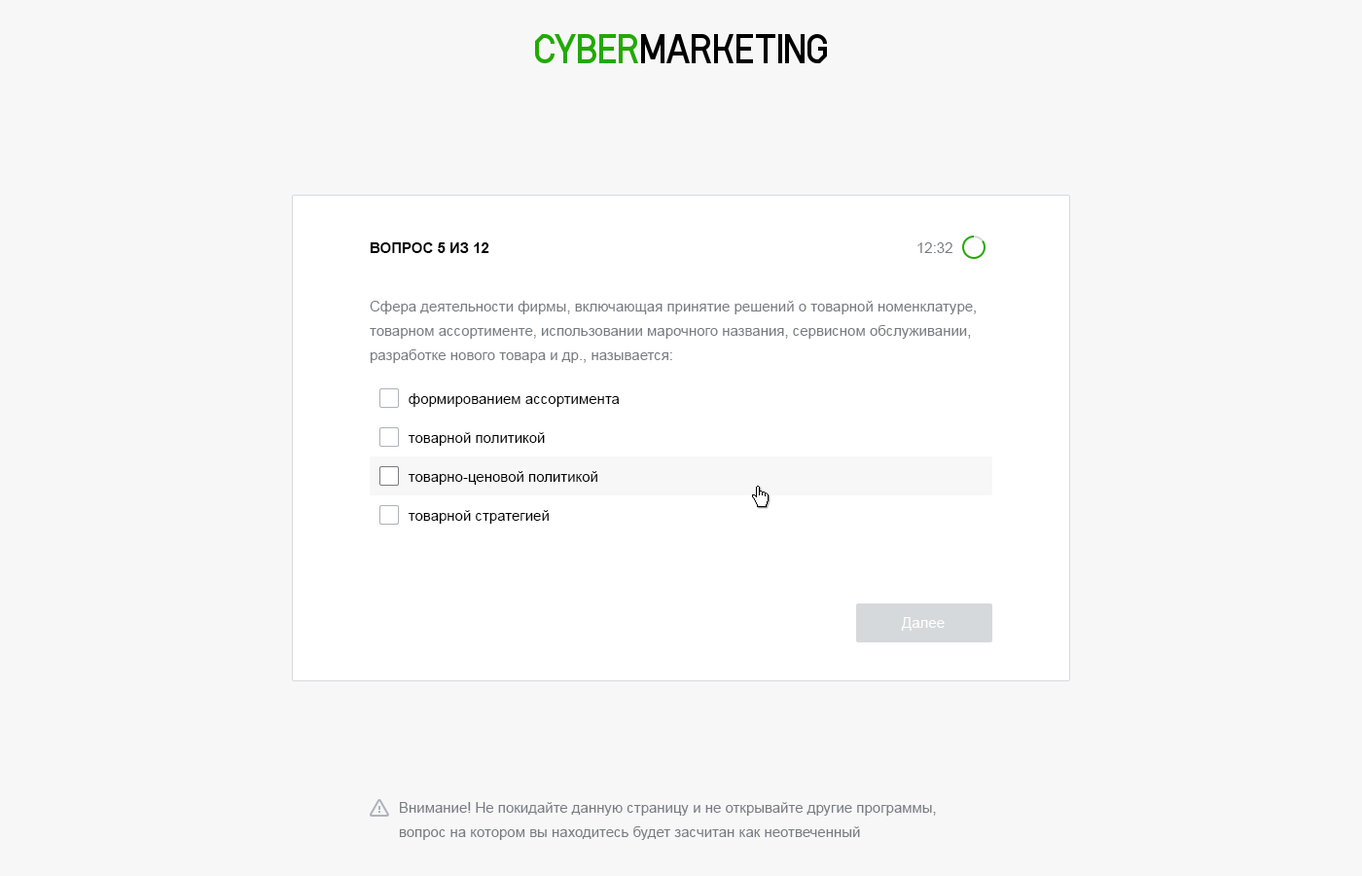
<style>
.page{position:relative;width:1362px;height:876px;background:#f7f7f8}
.page>*{position:absolute;margin:0}
.t1{font:14.6px "Arial-BoldMT";color:#000000;text-transform:uppercase}
.t2{font:14.6px "ArialMT";color:#787b81}
.t3{font:14.6px/24.3px "ArialMT";color:#787b81}
.t4{font:14.6px/38.9px "ArialMT";color:#000000}
.t5{font:14.6px "ArialMT";color:#ffffff}
</style>
<div class="page">
<p class="t1" style="left:370px;top:242px;width:119px;height:11px">Вопрос 5 из 12</p>
<p class="t2" style="left:917px;top:242px;width:35px;height:11px">12:32</p>
<p class="t3" style="left:370px;top:301px;width:606px;height:62px">Сфера деятельности фирмы, включающая принятие решений о товарной номенклатуре, товарном ассортименте, использовании марочного названия, сервисном обслуживании, разработке нового товара и др., называется:</p>
<p class="t4" style="left:408px;top:393px;width:212px;height:130px">формированием ассортимента<br>товарной политикой<br>товарно-ценовой политикой<br>товарной стратегией</p>
<p class="t5" style="left:901px;top:617px;width:44px;height:13px">Далее</p>
<p class="t3" style="left:399px;top:802px;width:537px;height:38px">Внимание! Не покидайте данную страницу и не открывайте другие программы, <br>вопрос на котором вы находитесь будет засчитан как неотвеченный</p>
</div>
